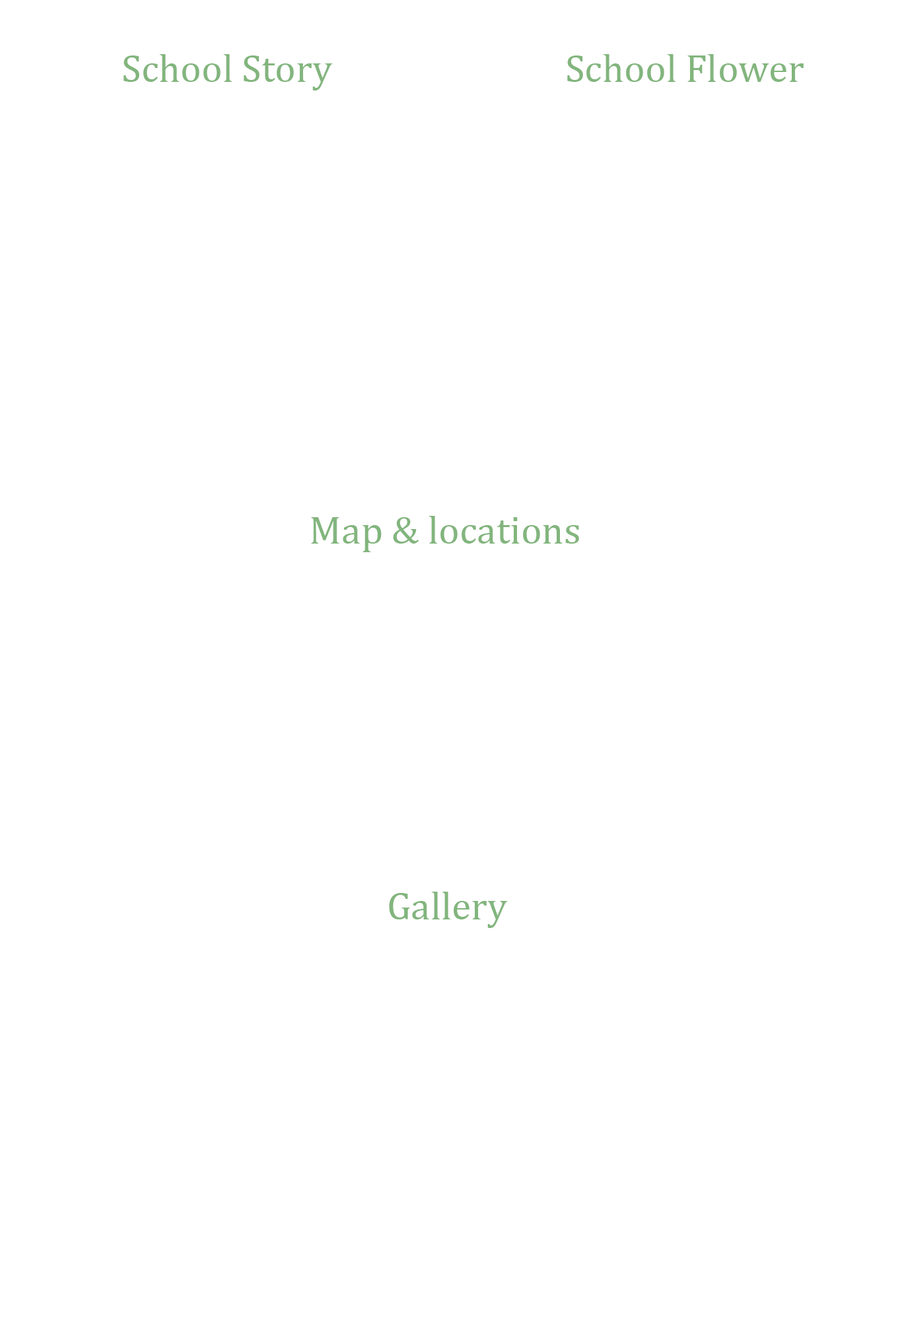
<style>
.page{position:relative;width:902px;height:1321px;background:#ffffff}
.page>*{position:absolute;margin:0}
.t1{font:39.6px "CambriaMath";color:#82b57d}
</style>
<div class="page">
<p class="t1" style="left:124px;top:54px;width:209px;height:37px">School Story</p>
<p class="t1" style="left:568px;top:54px;width:236px;height:28px">School Flower</p>
<p class="t1" style="left:311px;top:516px;width:268px;height:36px">Map &amp; locations</p>
<p class="t1" style="left:389px;top:892px;width:119px;height:36px">Gallery</p>
</div>
